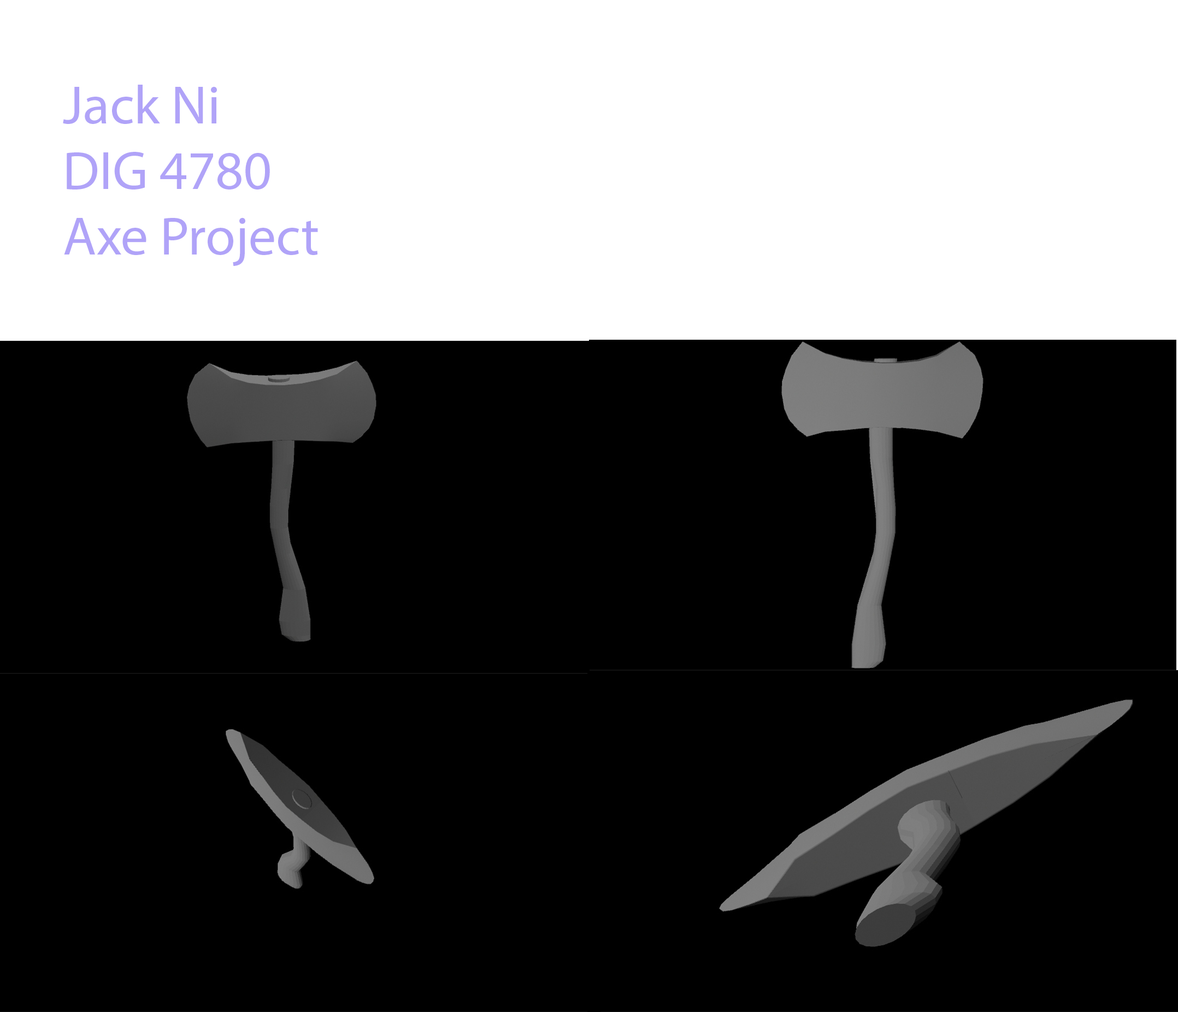
<style>
.page{position:relative;width:1178px;height:1012px;background:#000000}
.page>*{position:absolute;margin:0}
.t1{font:54.6px "MyriadPro-Regular";color:#b0a3f8}
</style>
<div class="page">
<p class="t1" style="left:63px;top:85px;width:255px;height:181px">Jack Ni<br>DIG 4780<br>Axe Project</p>
</div>
